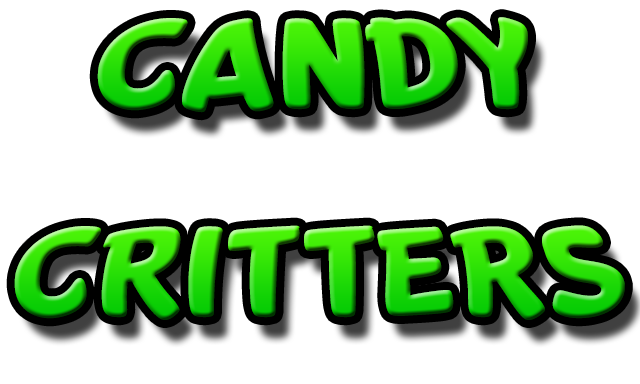
<style>
.page{position:relative;width:640px;height:384px;background:#ffffff}
.page>*{position:absolute;margin:0}
.t1{font:120px "BanzaiBros"}
</style>
<div class="page">
<p class="t1" style="left:97px;top:17px;width:431px;height:96px">CANDY</p>
<p class="t1" style="left:14px;top:225px;width:611px;height:95px">CRITTERS</p>
</div>
